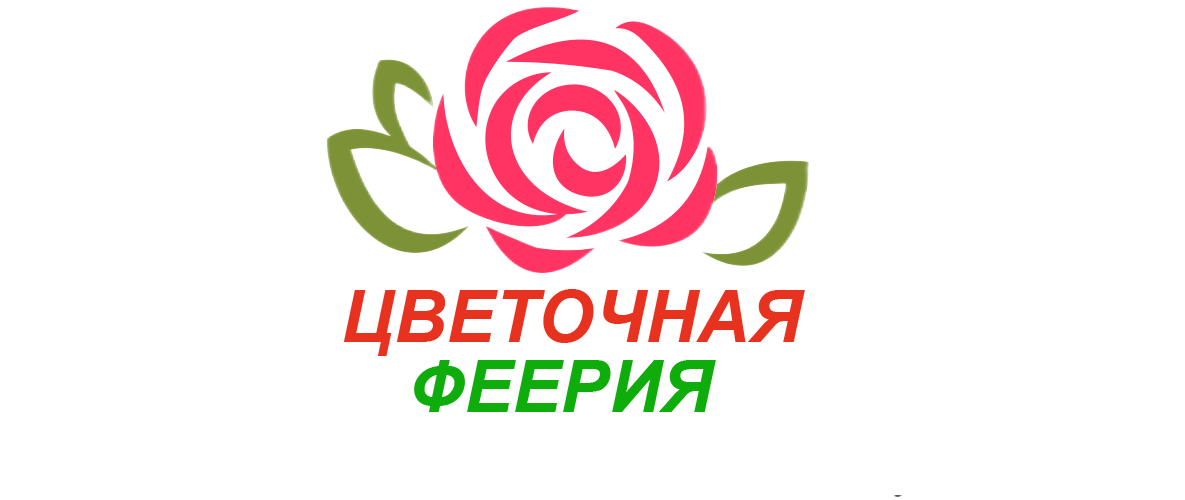
<style>
.page{position:relative;width:1185px;height:500px;background:#ffffff}
.page>*{position:absolute;margin:0}
.t1{font:72px "Arial-BoldItalicMT";color:#e6321e;text-transform:uppercase}
.t2{font:72px "Arial-BoldItalicMT";color:#0fad0c;text-transform:uppercase}
</style>
<div class="page">
<p class="t1" style="left:343px;top:289px;width:462px;height:67px">Цветочная</p>
<p class="t2" style="left:414px;top:360px;width:302px;height:52px">Феерия</p>
</div>
